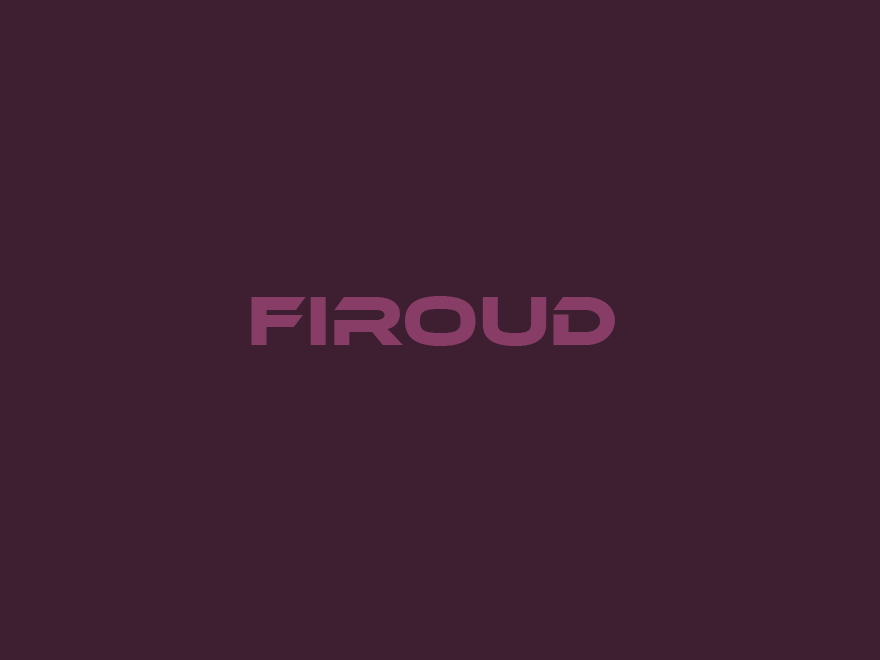
<style>
.page{position:relative;width:880px;height:660px;background:#3e1f32}
.page>*{position:absolute;margin:0}
.t1{font:72px "EthnocentricRg-Regular";color:#883d67}
</style>
<div class="page">
<p class="t1" style="left:251px;top:296px;width:364px;height:50px">FIROUD</p>
</div>
